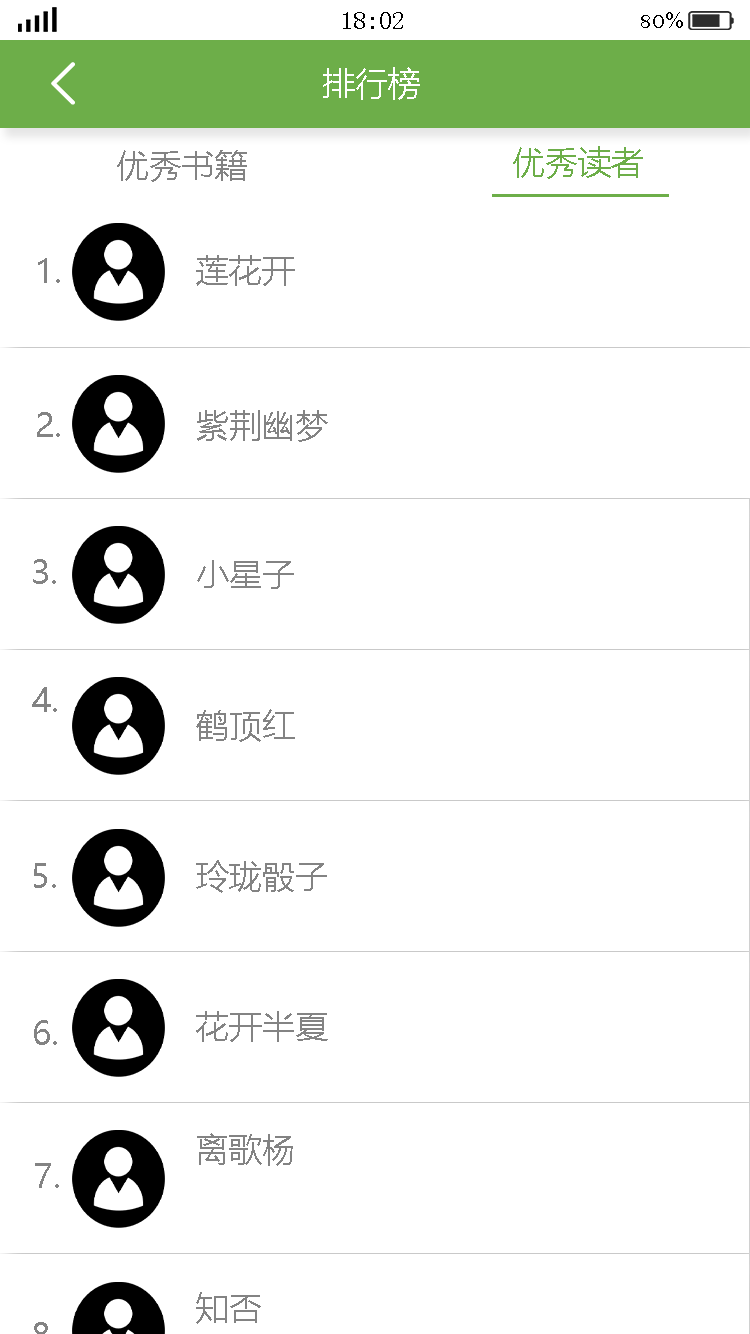
<style>
.page{position:relative;width:750px;height:1334px;background:#ffffff}
.page>*{position:absolute;margin:0}
.t1{font:25px "SimSun";color:#000000}
.t2{font:25px "BellMT";color:#000000}
.t3{font:33.3px "MicrosoftYaHei";color:#ffffff}
.t4{font:33.3px "MicrosoftYaHei";color:#838383}
.t5{font:33.3px "MicrosoftYaHei";color:#6dae49}
</style>
<div class="page">
<p class="t1" style="left:343px;top:12px;width:60px;height:17px">18:02</p>
<p class="t2" style="left:641px;top:12px;width:42px;height:16px">80%</p>
<p class="t3" style="left:323px;top:67px;width:97px;height:33px">排行榜</p>
<p class="t4" style="left:117px;top:150px;width:130px;height:32px">优秀书籍</p>
<p class="t5" style="left:513px;top:146px;width:130px;height:33px">优秀读者</p>
<p class="t4" style="left:196px;top:255px;width:99px;height:31px">莲花开</p>
<p class="t4" style="left:38px;top:258px;width:22px;height:25px">1.</p>
<p class="t4" style="left:37px;top:412px;width:23px;height:25px">2.</p>
<p class="t4" style="left:197px;top:410px;width:131px;height:32px">紫荆幽梦</p>
<p class="t4" style="left:33px;top:559px;width:23px;height:25px">3.</p>
<p class="t4" style="left:197px;top:560px;width:97px;height:29px">小星子</p>
<p class="t4" style="left:32px;top:687px;width:25px;height:25px">4.</p>
<p class="t4" style="left:196px;top:709px;width:99px;height:33px">鹤顶红</p>
<p class="t4" style="left:34px;top:863px;width:22px;height:25px">5.</p>
<p class="t4" style="left:196px;top:860px;width:131px;height:33px">玲珑骰子</p>
<p class="t4" style="left:196px;top:1011px;width:132px;height:31px">花开半夏</p>
<p class="t4" style="left:34px;top:1020px;width:23px;height:25px">6.</p>
<p class="t4" style="left:197px;top:1133px;width:96px;height:33px">离歌杨</p>
<p class="t4" style="left:35px;top:1163px;width:24px;height:25px">7.</p>
<p class="t4" style="left:196px;top:1292px;width:65px;height:32px">知否</p>
</div>
